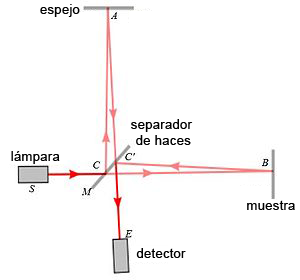
<style>
.page{position:relative;width:300px;height:280px;background:#ffffff}
.page>*{position:absolute;margin:0}
.t1{font:13.3px "ArialMT";letter-spacing:0.01em;color:#000000}
</style>
<div class="page">
<p class="t1" style="left:40px;top:4px;width:40px;height:13px">espejo</p>
<p class="t1" style="left:131px;top:119px;width:62px;height:26px;text-align:center">separador <br>de haces</p>
<p class="t1" style="left:11px;top:151px;width:49px;height:13px">lámpara</p>
<p class="t1" style="left:247px;top:200px;width:48px;height:10px">muestra</p>
<p class="t1" style="left:136px;top:248px;width:50px;height:10px">detector</p>
</div>
